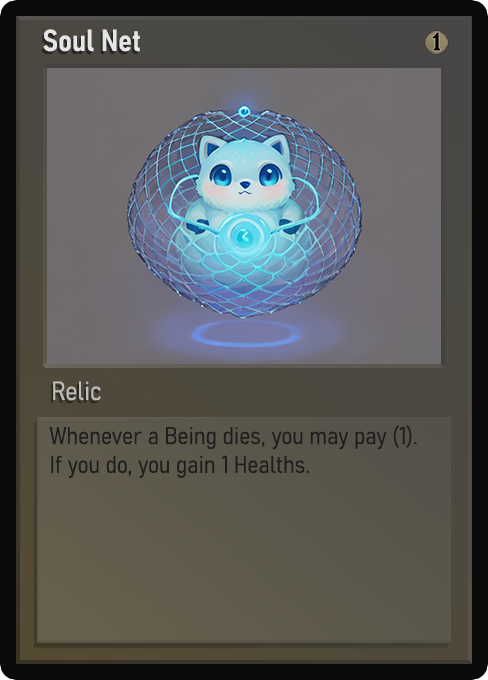
<style>
.page{position:relative;width:488px;height:680px}
.page>*{position:absolute;margin:0}
.t1{font:30px "Bahnschrift-SemiBoldSemiCondensed";color:#f2f2f2;font-weight:bold}
.t2{font:25px "WTRRoycroft";color:#000000;font-weight:bold;scale:1.09 1}
.t3{font:26px "Bahnschrift-LightSemiCondensed";color:#c8c8c8;font-weight:bold}
.t4{font:24px "Bahnschrift-LightSemiCondensed";color:#1e1e1e;font-weight:bold}
</style>
<div class="page">
<p class="t1" style="left:43px;top:29px;width:97px;height:23px;opacity:0.9">Soul Net</p>
<p class="t2" style="left:432px;top:32px;width:9px;height:19px">1</p>
<p class="t3" style="left:53px;top:381px;width:48px;height:20px;opacity:0.9">Relic</p>
<p class="t4" style="left:49px;top:425px;width:368px;height:53px">Whenever a Being dies, you may pay (1). If you do, you gain 1 Healths.</p>
</div>
